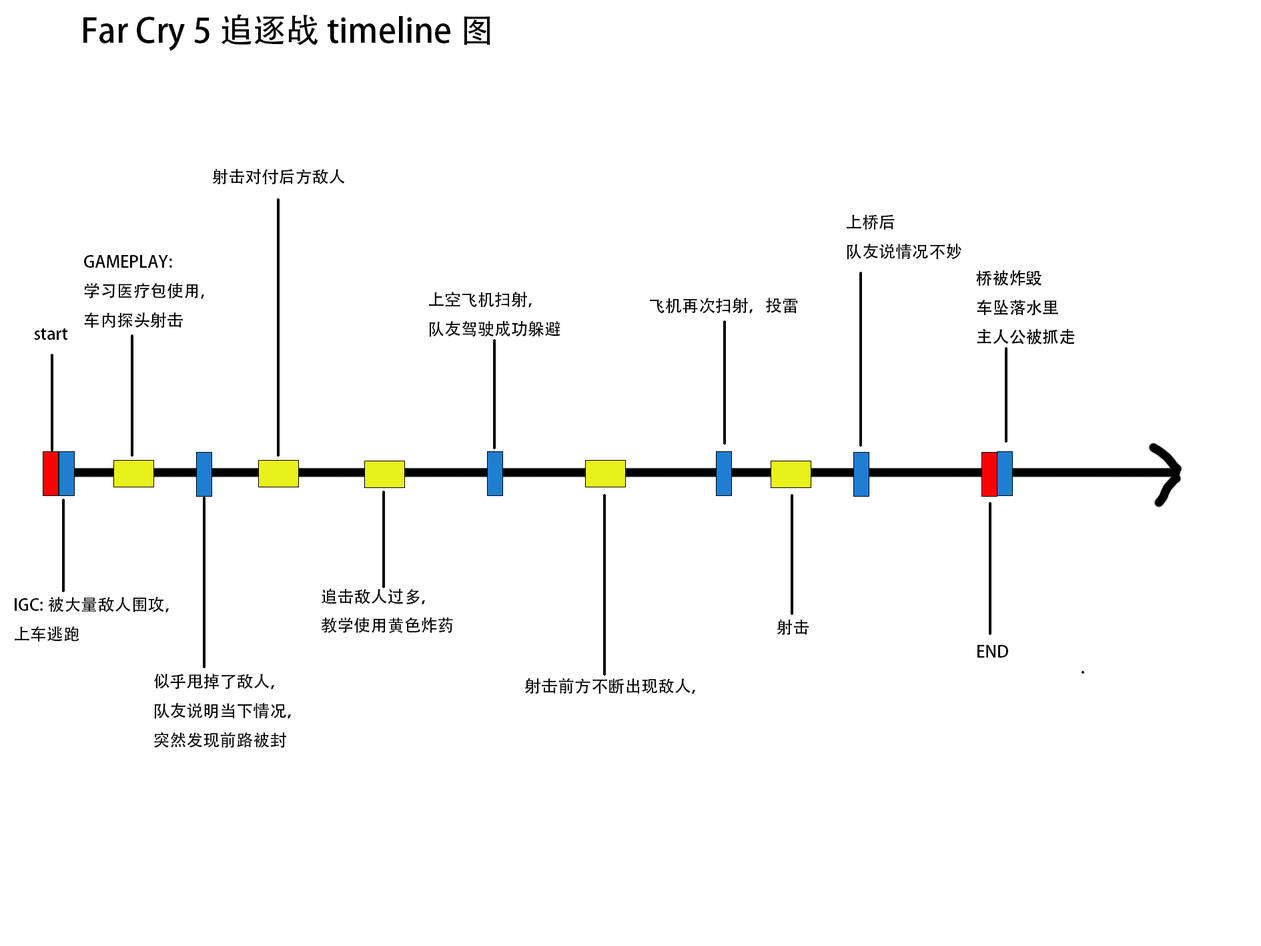
<style>
.page{position:relative;width:1261px;height:946px;background:#ffffff}
.page>*{position:absolute;margin:0}
.t1{font:33.4px "AdobeHeitiStd-Regular";color:#000000}
.t2{font:16.7px "AdobeHeitiStd-Regular";color:#000000}
</style>
<div class="page">
<p class="t1" style="left:83px;top:14px;width:407px;height:37px">Far Cry 5 追逐战 timeline图</p>
<p class="t2" style="left:213px;top:168px;width:132px;height:16px">射击对付后方敌人</p>
<p class="t2" style="left:847px;top:214px;width:115px;height:46px">上桥后<br>队友说情况不妙</p>
<p class="t2" style="left:84px;top:255px;width:120px;height:73px">GAMEPLAY:<br>学习医疗包使用，<br>车内探头射击</p>
<p class="t2" style="left:429px;top:292px;width:132px;height:45px">上空飞机扫射，<br>队友驾驶成功躲避</p>
<p class="t2" style="left:650px;top:298px;width:148px;height:16px">飞机再次扫射，投雷</p>
<p class="t2" style="left:34px;top:328px;width:34px;height:12px">start</p>
<p class="t2" style="left:321px;top:588px;width:132px;height:45px">追击敌人过多，<br>教学使用黄色炸药</p>
<p class="t2" style="left:15px;top:597px;width:154px;height:44px">IGC:被大量敌人围攻，<br>上车逃跑</p>
<p class="t2" style="left:777px;top:619px;width:32px;height:16px">射击</p>
<p class="t2" style="left:978px;top:645px;width:30px;height:12px">END</p>
<p class="t2" style="left:154px;top:673px;width:137px;height:74px">似乎甩掉了敌人，<br>队友说明当下情况，<br>突然发现前路被封</p>
<p class="t2" style="left:525px;top:677px;width:170px;height:17px">射击前方不断出现敌人，</p>
</div>
